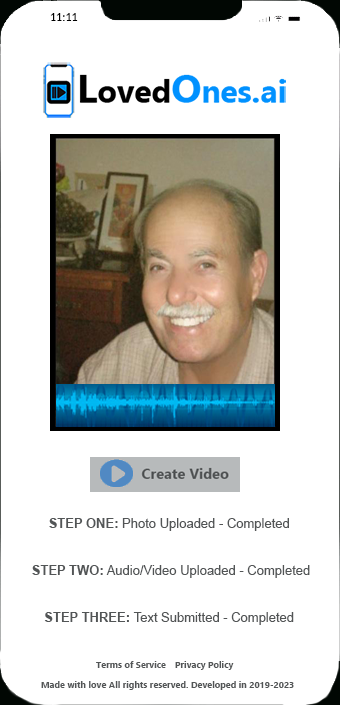
<style>
.page{position:relative;width:340px;height:705px;background:#ffffff}
.page>*{position:absolute;margin:0}
.t1{font:12px "Carlito";color:#000000}
.t2{font:13px "ArialMT";color:#525556}
.t3{font:13px "Arial-BoldMT";color:#525556}
.t4{font:9px "Ebrima-Bold";color:#525556}
</style>
<div class="page">
<p class="t1" style="left:50px;top:13px;width:28px;height:8px">11:11</p>
<p class="t2" style="left:32px;top:518px;width:278px;height:107px;text-align:center"><span class="t3">STEP ONE:</span> Photo Uploaded - Completed <br><br><br><span class="t3">STEP TWO:</span> Audio/Video Uploaded - Completed<br><br><br><span class="t3">STEP THREE: </span>Text Submitted - Completed</p>
<p class="t4" style="left:96px;top:661px;width:70px;height:7px">Terms of Service</p>
<p class="t4" style="left:175px;top:661px;width:59px;height:9px">Privacy Policy</p>
<p class="t4" style="left:41px;top:681px;width:253px;height:9px">Made with love All rights reserved. Developed in 2019-2023</p>
</div>
